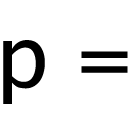
<style>
.page{position:relative;width:128px;height:128px;background:#ffffff}
.page>*{position:absolute;margin:0}
.t1{font:86.7px "LucidaSans";color:#000000}
</style>
<div class="page">
<p class="t1" style="left:3px;top:40px;width:125px;height:64px">p =</p>
</div>
